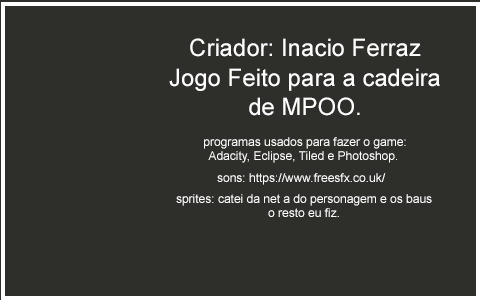
<style>
.page{position:relative;width:480px;height:300px;background:#2e2e2b}
.page>*{position:absolute;margin:0}
.t1{font:24px "ArialMT";color:#ffffff}
.t2{font:12px "ArialMT";color:#ffffff}
</style>
<div class="page">
<p class="t1" style="left:190px;top:38px;width:231px;height:19px">Criador: Inacio Ferraz</p>
<p class="t1" style="left:169px;top:68px;width:271px;height:48px;text-align:center">Jogo Feito para a cadeira<br>de MPOO.</p>
<p class="t2" style="left:204px;top:137px;width:202px;height:26px;text-align:center">programas usados para fazer o game:<br>Adacity, Eclipse, Tiled e Photoshop.</p>
<p class="t2" style="left:217px;top:173px;width:169px;height:12px">sons: https://www.freesfx.co.uk/</p>
<p class="t2" style="left:176px;top:194px;width:256px;height:23px;text-align:center">sprites: catei da net a do personagem e os baus<br>o resto eu fiz.</p>
</div>
